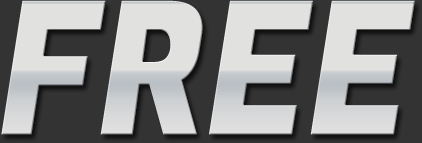
<style>
.page{position:relative;width:422px;height:143px;background:#333333}
.page>*{position:absolute;margin:0}
.t1{font:185.2px "FugazOne-Regular";color:#dfdfdf;scale:0.89 1}
</style>
<div class="page">
<p class="t1" style="left:1px;top:0px;width:414px;height:135px">FREE</p>
</div>
